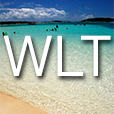
<style>
.page{position:relative;width:114px;height:114px}
.page>*{position:absolute;margin:0}
.t1{font:55px "Helvetica-Light";color:#ffffff;font-weight:bold}
</style>
<div class="page">
<p class="t1" style="left:3px;top:35px;width:108px;height:41px">WLT</p>
</div>
